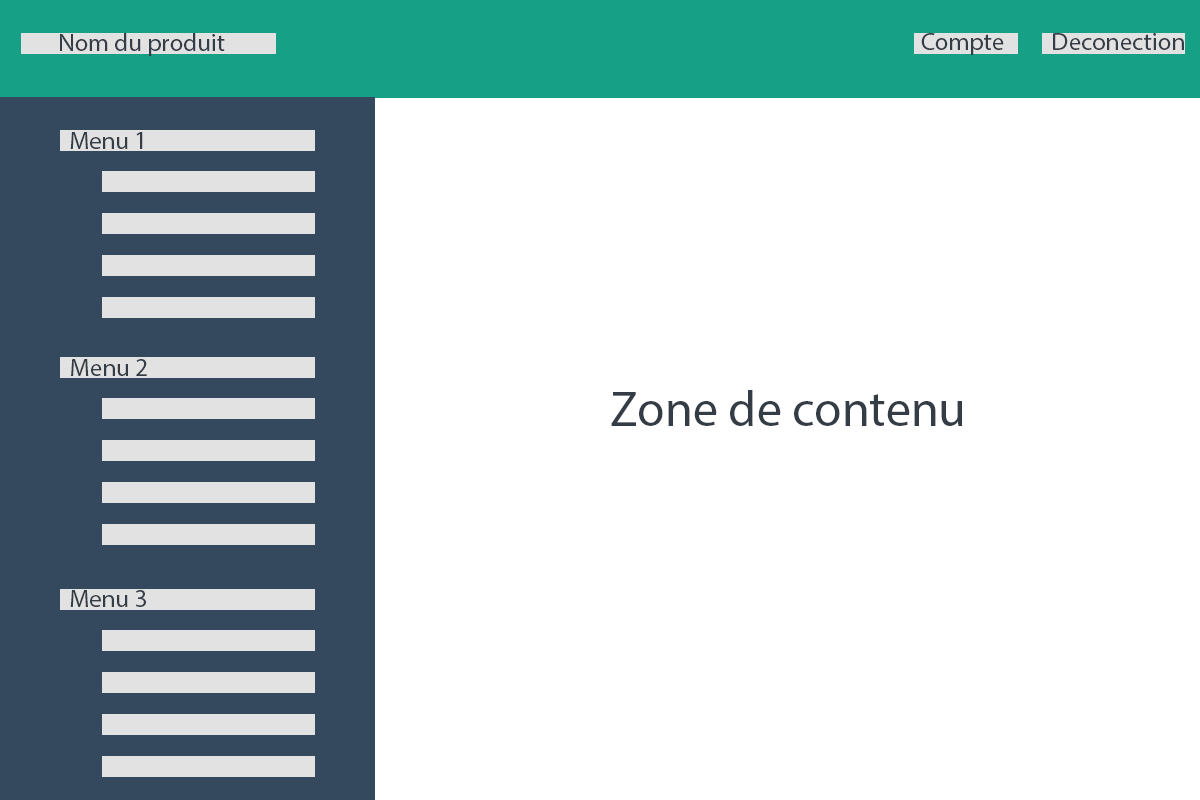
<style>
.page{position:relative;width:1200px;height:800px;background:#ffffff}
.page>*{position:absolute;margin:0}
.t1{font:25px "MyriadPro-Regular";color:#343c45}
.t2{font:12px "MyriadPro-Regular";color:#343c45}
</style>
<div class="page">
<p class="t1" style="left:60px;top:33px;width:165px;height:23px">Nom du produit</p>
<p class="t1" style="left:921px;top:33px;width:83px;height:22px">Compte</p>
<p class="t1" style="left:1053px;top:33px;width:131px;height:17px">Deconection</p>
<p class="t1" style="left:70px;top:132px;width:73px;height:17px">Menu 1</p>
<p class="t1" style="left:71px;top:359px;width:76px;height:17px">Menu 2</p>
<p class="t2" style="left:611px;top:390px;width:352px;height:36px">Zone de contenu</p>
<p class="t1" style="left:70px;top:590px;width:76px;height:17px">Menu 3</p>
</div>
